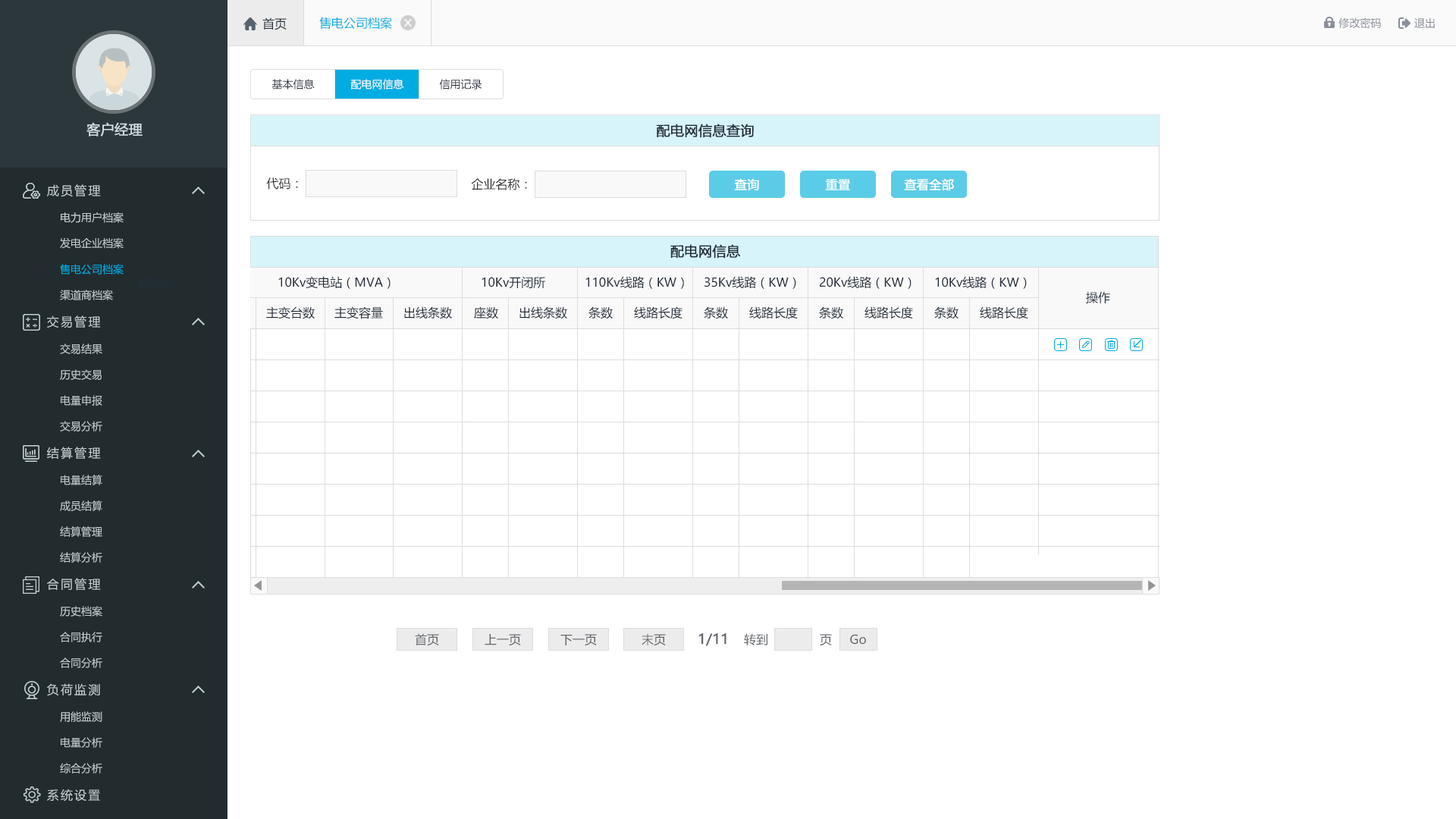
<style>
.page{position:relative;width:1456px;height:819px;background:#ffffff}
.page>*{position:absolute;margin:0}
.t1{font:12.1px "MicrosoftYaHei";color:#242e3b}
.t2{font:12.1px "MicrosoftYaHei";color:#00ace2}
.t3{font:10.6px "MicrosoftYaHei";color:#8a8f99}
.t4{font:10.6px "MicrosoftYaHei";color:#242e3b}
.t5{font:10.6px "MicrosoftYaHei";color:#ffffff}
.t6{font:13.6px "MicrosoftYaHei";color:#d1dce2;font-weight:bold}
.t7{font:13.6px "MicrosoftYaHei";color:#242e3b;font-weight:bold}
.t8{font:12.1px "MicrosoftYaHei";letter-spacing:0.14em;color:#c2cdd2}
.t9{font:12.1px "MicrosoftYaHei";color:#333333}
.t10{font:12.1px "MicrosoftYaHei";color:#ffffff;font-weight:bold}
.t11{font:10.6px "MicrosoftYaHei";color:#c2cdd2}
.t12{font:10.6px "MicrosoftYaHei";color:#00ace2}
.t13{font:12.1px "MicrosoftYaHei";color:#61656b}
.t14{font:13.6px "MicrosoftYaHei";color:#61656b;font-weight:bold}
</style>
<div class="page">
<p class="t1" style="left:262px;top:17px;width:25px;height:13px">首页</p>
<p class="t2" style="left:319px;top:17px;width:73px;height:13px">售电公司档案</p>
<p class="t3" style="left:1338px;top:17px;width:43px;height:12px">修改密码</p>
<p class="t3" style="left:1414px;top:17px;width:21px;height:11px">退出</p>
<p class="t4" style="left:271px;top:79px;width:44px;height:10px">基本信息</p>
<p class="t5" style="left:350px;top:79px;width:54px;height:10px">配电网信息</p>
<p class="t4" style="left:439px;top:79px;width:43px;height:10px">信用记录</p>
<p class="t6" style="left:86px;top:122px;width:57px;height:14px">客户经理</p>
<p class="t7" style="left:656px;top:124px;width:98px;height:14px">配电网信息查询</p>
<p class="t8" style="left:47px;top:184px;width:54px;height:13px">成员管理</p>
<p class="t9" style="left:266px;top:177px;width:32px;height:13px">代码：</p>
<p class="t9" style="left:471px;top:178px;width:56px;height:12px">企业名称：</p>
<p class="t10" style="left:734px;top:178px;width:25px;height:12px">查询</p>
<p class="t10" style="left:825px;top:180px;width:26px;height:12px">重置</p>
<p class="t10" style="left:825px;top:179px;width:26px;height:11px">重置</p>
<p class="t10" style="left:904px;top:178px;width:50px;height:13px">查看全部</p>
<p class="t11" style="left:61px;top:212px;width:63px;height:11px">电力用户档案</p>
<p class="t11" style="left:60px;top:237px;width:64px;height:12px">发电企业档案</p>
<p class="t7" style="left:670px;top:244px;width:71px;height:15px">配电网信息</p>
<p class="t12" style="left:60px;top:264px;width:64px;height:11px">售电公司档案</p>
<p class="t1" style="left:278px;top:276px;width:113px;height:13px">10Kv变电站（MVA）</p>
<p class="t1" style="left:482px;top:276px;width:63px;height:13px">10Kv开闭所</p>
<p class="t1" style="left:585px;top:276px;width:99px;height:13px">110Kv线路（KW）</p>
<p class="t1" style="left:704px;top:276px;width:92px;height:13px">35Kv线路（KW）</p>
<p class="t1" style="left:820px;top:276px;width:92px;height:13px">20Kv线路（KW）</p>
<p class="t1" style="left:935px;top:276px;width:92px;height:13px">10Kv线路（KW）</p>
<p class="t11" style="left:60px;top:290px;width:53px;height:10px">渠道商档案</p>
<p class="t1" style="left:1086px;top:291px;width:24px;height:12px">操作</p>
<p class="t8" style="left:47px;top:315px;width:54px;height:13px">交易管理</p>
<p class="t1" style="left:266px;top:306px;width:49px;height:13px">主变台数</p>
<p class="t1" style="left:334px;top:306px;width:49px;height:13px">主变容量</p>
<p class="t1" style="left:404px;top:306px;width:48px;height:13px">出线条数</p>
<p class="t1" style="left:474px;top:306px;width:24px;height:13px">座数</p>
<p class="t1" style="left:519px;top:306px;width:48px;height:13px">出线条数</p>
<p class="t1" style="left:588px;top:306px;width:25px;height:13px">条数</p>
<p class="t1" style="left:634px;top:306px;width:48px;height:13px">线路长度</p>
<p class="t1" style="left:704px;top:306px;width:24px;height:13px">条数</p>
<p class="t1" style="left:749px;top:306px;width:49px;height:13px">线路长度</p>
<p class="t1" style="left:819px;top:306px;width:24px;height:13px">条数</p>
<p class="t1" style="left:864px;top:306px;width:49px;height:13px">线路长度</p>
<p class="t1" style="left:934px;top:306px;width:25px;height:13px">条数</p>
<p class="t1" style="left:980px;top:306px;width:48px;height:13px">线路长度</p>
<p class="t11" style="left:60px;top:344px;width:42px;height:10px">交易结果</p>
<p class="t11" style="left:60px;top:369px;width:42px;height:11px">历史交易</p>
<p class="t11" style="left:61px;top:395px;width:41px;height:11px">电量申报</p>
<p class="t11" style="left:60px;top:421px;width:42px;height:10px">交易分析</p>
<p class="t8" style="left:47px;top:447px;width:54px;height:13px">结算管理</p>
<p class="t11" style="left:61px;top:475px;width:41px;height:10px">电量结算</p>
<p class="t11" style="left:60px;top:500px;width:42px;height:11px">成员结算</p>
<p class="t11" style="left:60px;top:526px;width:42px;height:11px">结算管理</p>
<p class="t11" style="left:60px;top:552px;width:42px;height:11px">结算分析</p>
<p class="t8" style="left:47px;top:578px;width:54px;height:12px">合同管理</p>
<p class="t11" style="left:60px;top:606px;width:42px;height:11px">历史档案</p>
<p class="t11" style="left:60px;top:632px;width:42px;height:10px">合同执行</p>
<p class="t13" style="left:415px;top:633px;width:24px;height:13px">首页</p>
<p class="t13" style="left:485px;top:634px;width:36px;height:12px">上一页</p>
<p class="t13" style="left:560px;top:634px;width:37px;height:12px">下一页</p>
<p class="t13" style="left:642px;top:633px;width:24px;height:13px">末页</p>
<p class="t14" style="left:698px;top:633px;width:28px;height:13px">1/11</p>
<p class="t13" style="left:744px;top:633px;width:23px;height:12px">转到</p>
<p class="t13" style="left:820px;top:634px;width:12px;height:12px">页</p>
<p class="t13" style="left:850px;top:634px;width:16px;height:11px">Go</p>
<p class="t11" style="left:60px;top:657px;width:42px;height:11px">合同分析</p>
<p class="t8" style="left:47px;top:683px;width:53px;height:13px">负荷监测</p>
<p class="t11" style="left:60px;top:711px;width:42px;height:11px">用能监测</p>
<p class="t11" style="left:61px;top:737px;width:41px;height:11px">电量分析</p>
<p class="t11" style="left:60px;top:763px;width:42px;height:10px">综合分析</p>
<p class="t8" style="left:47px;top:789px;width:53px;height:13px">系统设置</p>
</div>
